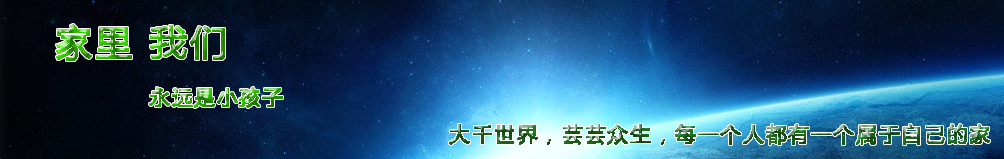
<style>
.page{position:relative;width:1004px;height:159px}
.page>*{position:absolute;margin:0}
.t1{font:20.4px "MicrosoftYaHei";letter-spacing:0.08em;font-weight:bold}
.t2{font:36.7px "MicrosoftYaHei";letter-spacing:0.08em;font-weight:bold}
</style>
<div class="page">
<p class="t1" style="left:56px;top:24px;width:227px;height:84px"><span class="t2">家里 我们<br></span>           永远是小孩子</p>
<p class="t1" style="left:449px;top:124px;width:541px;height:21px">大千世界，芸芸众生，每一个人都有一个属于自己的家</p>
</div>
